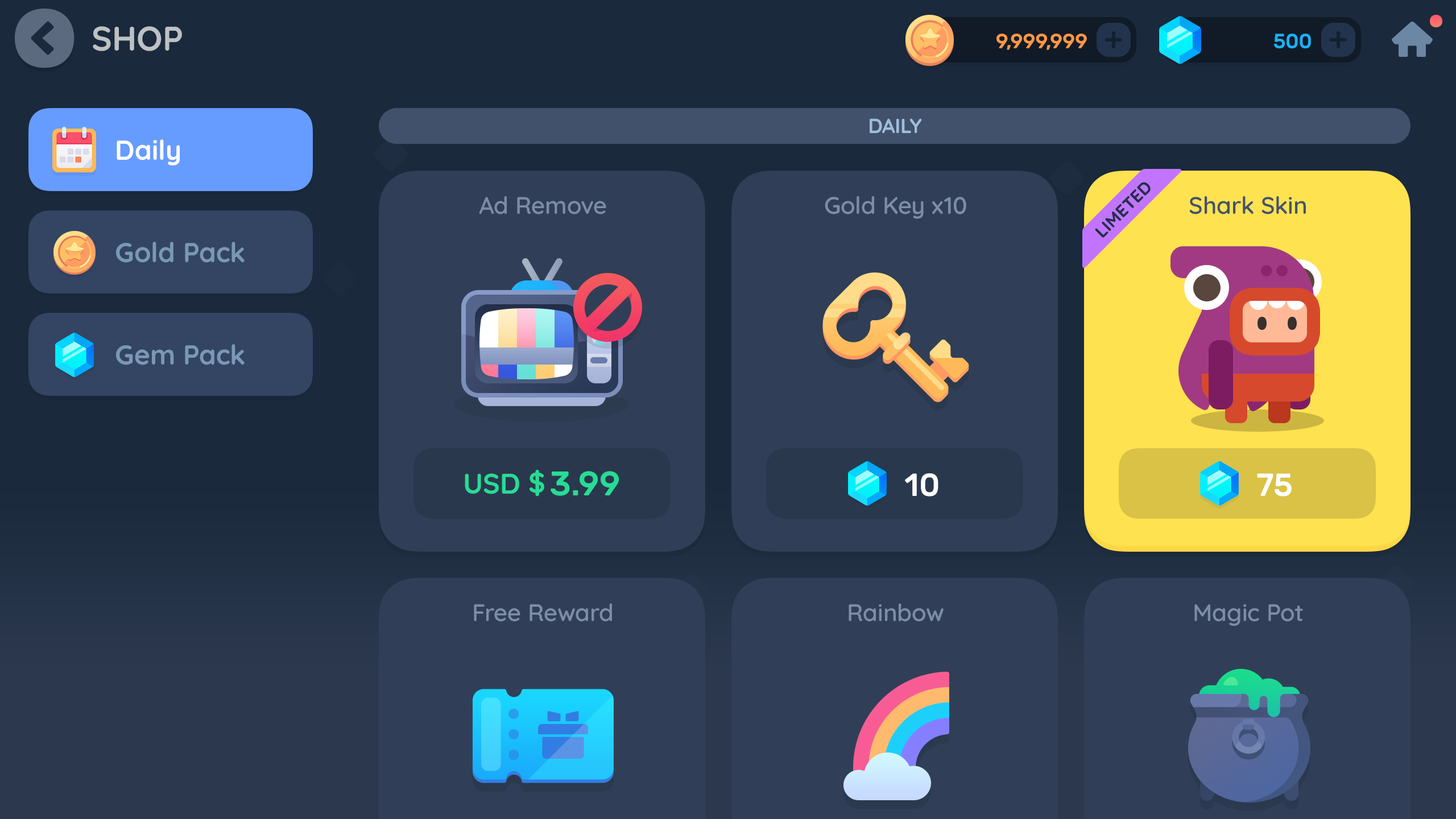
<style>
.page{position:relative;width:1456px;height:819px;background:#303f57}
.page>*{position:absolute;margin:0}
.t1{font:34.1px "Quicksand-Bold";color:#bdc1c4;text-transform:uppercase}
.t2{font:20.5px "Rubik-Medium";letter-spacing:-0.01em;color:#fd9744;text-transform:uppercase}
.t3{font:20.5px "Rubik-Medium";letter-spacing:-0.01em;color:#1cb0f6;text-transform:uppercase}
.t4{font:20.5px "Quicksand-Bold";letter-spacing:-0.01em;color:#a0bdd8;text-transform:uppercase}
.t5{font:27.3px "Quicksand-Bold";color:#ffffff}
.t6{font:17.1px "Quicksand-Bold";letter-spacing:0.02em;color:#203049;text-transform:uppercase}
.t7{font:23.9px "Quicksand-SemiBold";color:#7d8da7}
.t8{font:23.9px "Quicksand-SemiBold";color:#43536c}
.t9{font:27.3px "Quicksand-Bold";color:#7a98b6}
.t10{font:28.4px "Quicksand-Bold";color:#27dc95}
.t11{font:34.1px "Rubik-Medium";color:#27dc95}
.t12{font:31.8px "Rubik-Medium";color:#ffffff}
</style>
<div class="page">
<p class="t1" style="left:93px;top:26px;width:89px;height:25px">Shop</p>
<p class="t2" style="left:996px;top:34px;width:91px;height:16px">9,999,999</p>
<p class="t3" style="left:1274px;top:34px;width:37px;height:14px">500</p>
<p class="t4" style="left:870px;top:118px;width:52px;height:15px">Daily</p>
<p class="t5" style="left:117px;top:139px;width:63px;height:27px">Daily</p>
<p class="t6" style="left:1095px;top:182px;width:56px;height:56px;rotate:-45deg">Limeted</p>
<p class="t7" style="left:479px;top:196px;width:127px;height:18px">Ad Remove</p>
<p class="t7" style="left:825px;top:196px;width:141px;height:23px">Gold Key x10</p>
<p class="t8" style="left:1189px;top:196px;width:117px;height:18px">Shark Skin</p>
<p class="t9" style="left:116px;top:242px;width:129px;height:21px">Gold Pack</p>
<p class="t9" style="left:116px;top:344px;width:129px;height:21px">Gem Pack</p>
<p class="t10" style="left:465px;top:470px;width:79px;height:27px">USD $</p>
<p class="t11" style="left:551px;top:471px;width:68px;height:25px">3.99</p>
<p class="t12" style="left:905px;top:473px;width:33px;height:24px">10</p>
<p class="t12" style="left:1257px;top:473px;width:35px;height:24px">75</p>
<p class="t7" style="left:474px;top:603px;width:138px;height:19px">Free Reward</p>
<p class="t7" style="left:849px;top:603px;width:95px;height:19px">Rainbow</p>
<p class="t7" style="left:1194px;top:604px;width:109px;height:22px">Magic Pot</p>
</div>
